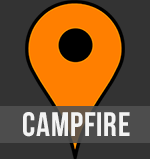
<style>
.page{position:relative;width:150px;height:159px;background:#333333}
.page>*{position:absolute;margin:0}
.t1{font:34px "BebasNeue";letter-spacing:0.025em;color:#f3f3f3}
</style>
<div class="page">
<p class="t1" style="left:23px;top:112px;width:107px;height:25px">CampFire</p>
</div>
